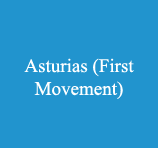
<style>
.page{position:relative;width:158px;height:148px;background:#2194ce}
.page>*{position:absolute;margin:0}
.t1{font:19px "TimesNewRomanPSMT";color:#ffffff}
</style>
<div class="page">
<p class="t1" style="left:24px;top:58px;width:110px;height:41px;text-align:center">Asturias (First<br>Movement)</p>
</div>
